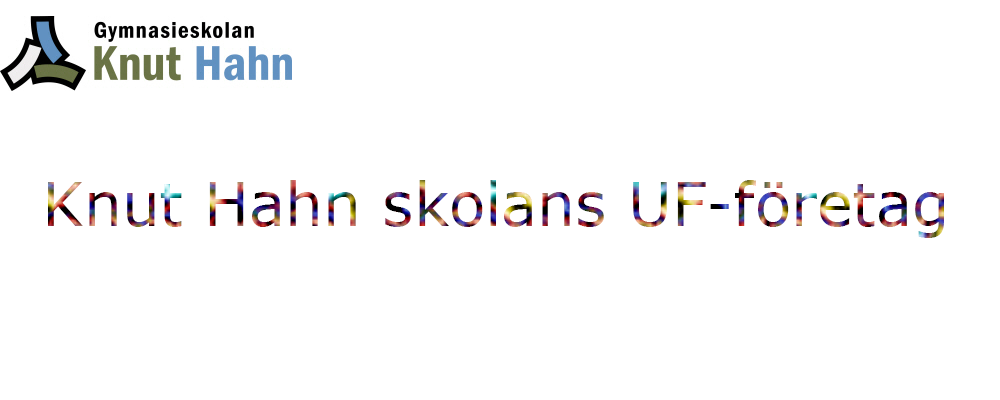
<style>
.page{position:relative;width:1000px;height:400px;background:#ffffff}
.page>*{position:absolute;margin:0}
.t1{font:60px "Verdana"}
</style>
<div class="page">
<p class="t1" style="left:48px;top:180px;width:896px;height:58px">Knut Hahn skolans UF-företag</p>
</div>
